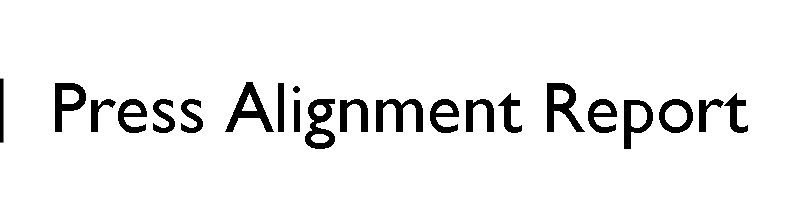
<style>
.page{position:relative;width:798px;height:201px;background:#ffffff}
.page>*{position:absolute;margin:0}
.t1{font:72px "GillSansMT";color:#000000}
</style>
<div class="page">
<p class="t1" style="left:55px;top:82px;width:693px;height:67px">Press Alignment Report</p>
</div>
